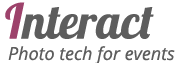
<style>
.page{position:relative;width:180px;height:63px;background:#ffffff}
.page>*{position:absolute;margin:0}
.t1{font:48px "Lobster1.4";color:#5d5d5d}
.t2{font:48px "Lobster1.4";color:#9d426b}
.t3{font:18px "OpenSans-Italic";color:#5d5d5d}
</style>
<div class="page">
<p class="t1" style="left:5px;top:2px;width:149px;height:37px"><span class="t2">I</span>nteract</p>
<p class="t3" style="left:8px;top:46px;width:167px;height:19px">Photo tech for events</p>
</div>
